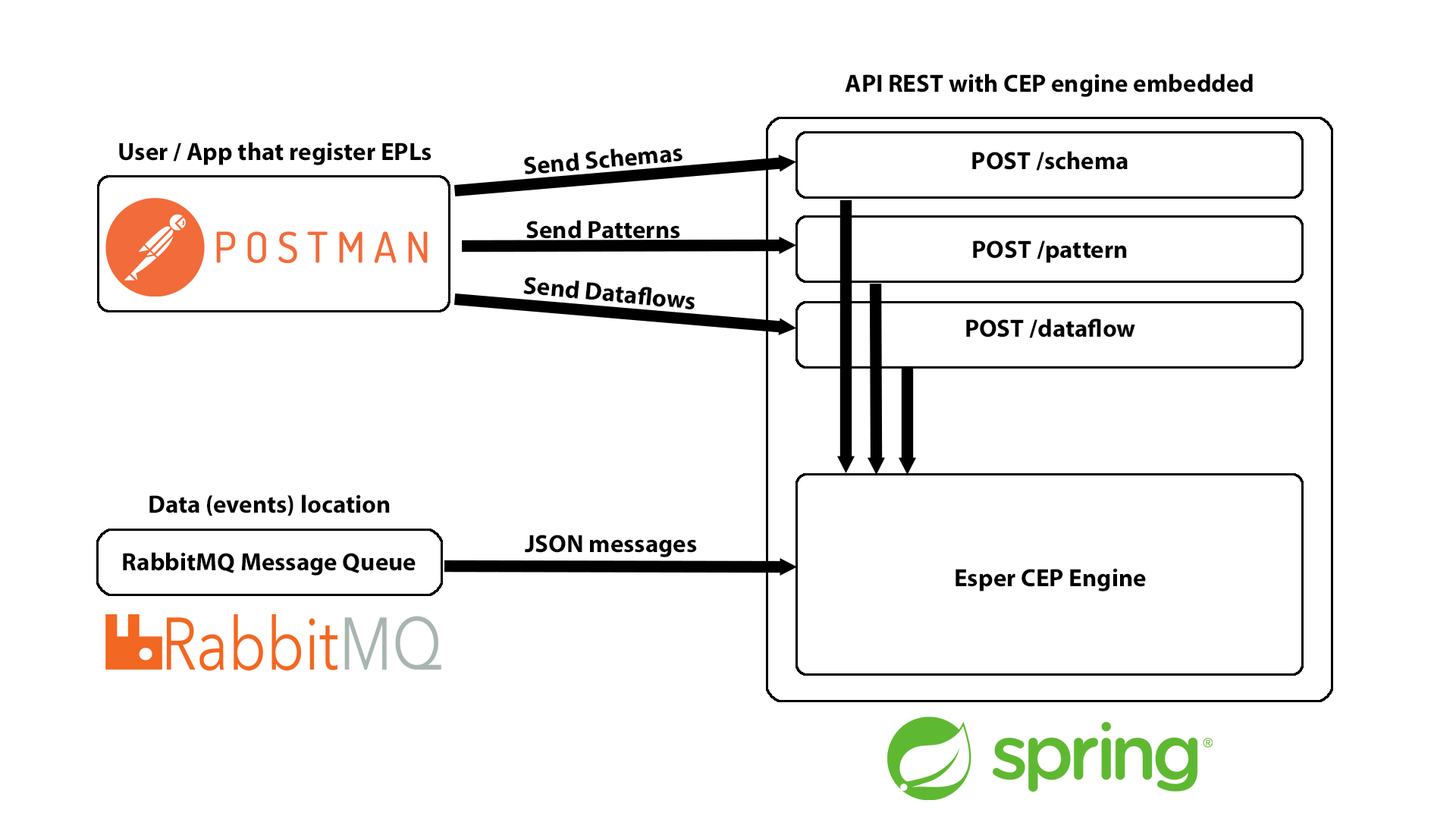
<style>
.page{position:relative;width:1456px;height:819px;background:#ffffff}
.page>*{position:absolute;margin:0}
.t1{font:25px "MyriadPro-Bold";color:#000000}
</style>
<div class="page">
<p class="t1" style="left:845px;top:74px;width:408px;height:23px">API REST with CEP engine embedded</p>
<p class="t1" style="left:119px;top:142px;width:312px;height:23px">User / App that register EPLs</p>
<p class="t1" style="left:524px;top:148px;width:158px;height:26px;rotate:-5deg">Send Schemas</p>
<p class="t1" style="left:972px;top:151px;width:156px;height:20px">POST /schema</p>
<p class="t1" style="left:526px;top:220px;width:154px;height:19px">Send Patterns</p>
<p class="t1" style="left:973px;top:240px;width:154px;height:23px">POST /pattern</p>
<p class="t1" style="left:523px;top:277px;width:172px;height:32px;rotate:5deg">Send Dataflows</p>
<p class="t1" style="left:966px;top:318px;width:169px;height:20px">POST /dataflow</p>
<p class="t1" style="left:149px;top:494px;width:241px;height:22px">Data (events) location</p>
<p class="t1" style="left:525px;top:535px;width:172px;height:22px">JSON messages</p>
<p class="t1" style="left:123px;top:552px;width:293px;height:24px">RabbitMQ Message Queue</p>
<p class="t1" style="left:955px;top:568px;width:191px;height:23px">Esper CEP Engine</p>
</div>
